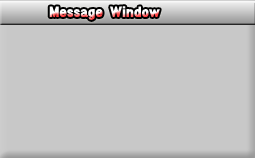
<style>
.page{position:relative;width:255px;height:158px;background:#c8c8c8}
.page>*{position:absolute;margin:0}
.t1{font:14px "GothicXB-HM"}
</style>
<div class="page">
<p class="t1" style="left:49px;top:6px;width:111px;height:14px">Message Window</p>
</div>
